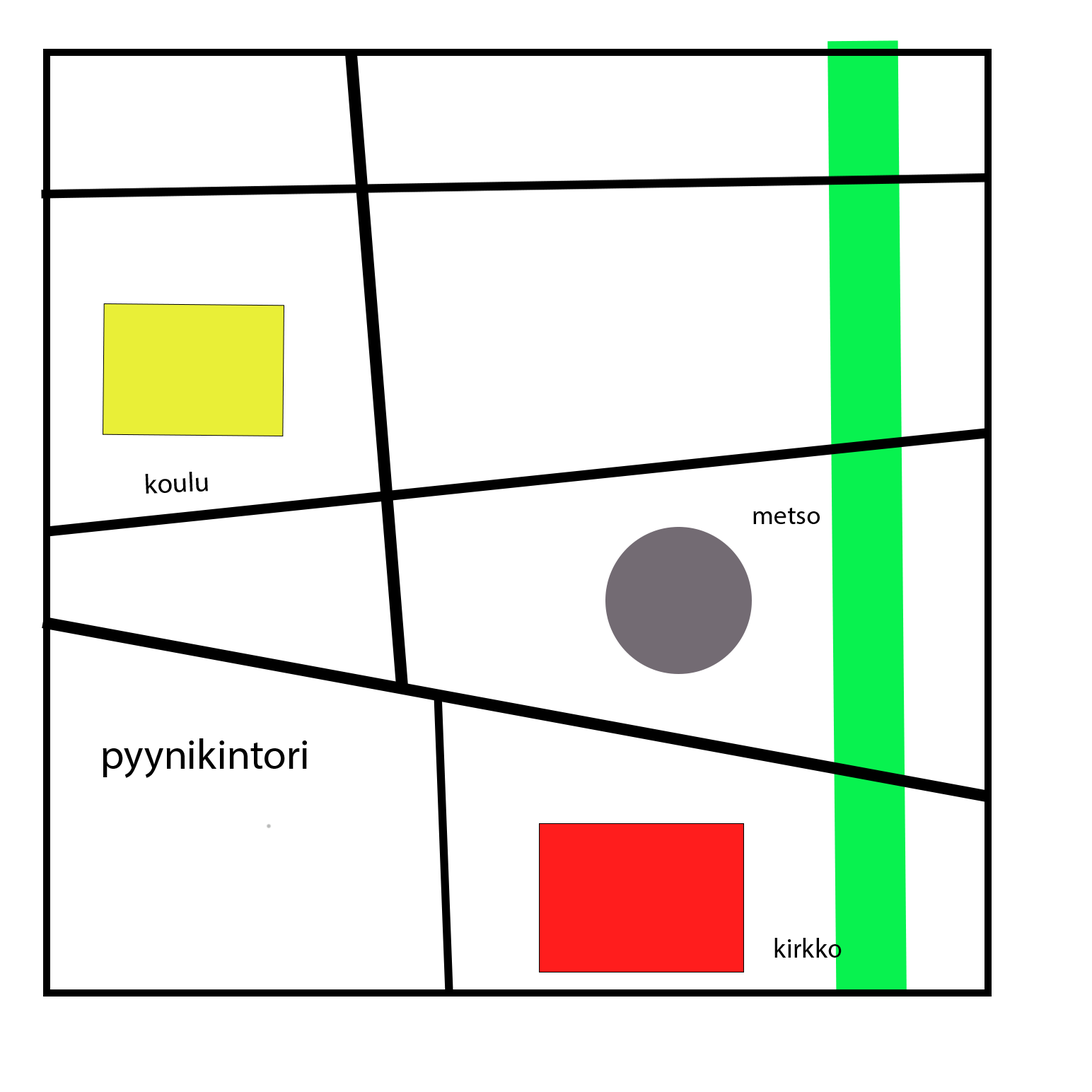
<style>
.page{position:relative;width:1092px;height:1092px;background:#ffffff}
.page>*{position:absolute;margin:0}
.t1{font:27.7px "MyriadPro-Regular";color:#000000}
.t2{font:26.3px "MyriadPro-Regular";color:#000000}
.t3{font:41.8px "MyriadPro-Regular";color:#000000}
.t4{font:27px "MyriadPro-Regular";color:#000000}
</style>
<div class="page">
<p class="t1" style="left:145px;top:472px;width:63px;height:22px;rotate:-2deg">koulu</p>
<p class="t2" style="left:753px;top:507px;width:67px;height:17px">metso</p>
<p class="t3" style="left:103px;top:738px;width:204px;height:40px">pyynikintori</p>
<p class="t4" style="left:774px;top:938px;width:68px;height:20px">kirkko</p>
</div>
